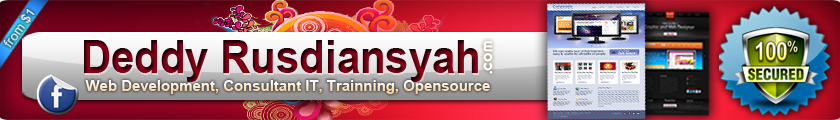
<style>
.page{position:relative;width:840px;height:120px}
.page>*{position:absolute;margin:0}
.t1{font:13px "ArialMT";color:#eff3f5}
.t2{font:46px "Arial-BoldMT";scale:0.91 1}
.t3{font:18px "Arista2.0";color:#ffffff}
.t4{font:14.9px "Arial-BoldMT"}
</style>
<div class="page">
<p class="t1" style="left:3px;top:9px;width:32px;height:39px;rotate:-54deg">from $1</p>
<p class="t2" style="left:84px;top:40px;width:394px;height:42px">Deddy Rusdiansyah</p>
<p class="t3" style="left:483px;top:41px;width:10px;height:33px;rotate:-90deg">.com</p>
<p class="t4" style="left:85px;top:80px;width:405px;height:14px">Web Development, Consultant IT, Trainning, Opensource</p>
</div>
